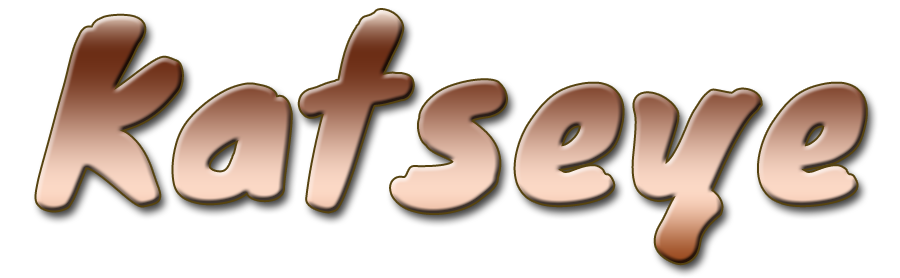
<style>
.page{position:relative;width:900px;height:278px;background:#ffffff}
.page>*{position:absolute;margin:0}
.t1{font:220px "Knewave";font-weight:bold}
</style>
<div class="page">
<p class="t1" style="left:36px;top:10px;width:830px;height:254px">Katseye</p>
</div>
